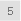
<style>
.page{position:relative;width:21px;height:21px;background:#e0e0e0}
.page>*{position:absolute;margin:0}
.t1{font:10.7px "Arimo";color:#787878;scale:1.11 1}
</style>
<div class="page">
<p class="t1" style="left:8px;top:7px;width:5px;height:8px">5</p>
</div>
